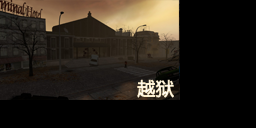
<style>
.page{position:relative;width:256px;height:128px;background:#000000}
.page>*{position:absolute;margin:0}
.t1{font:18px "MicrosoftYaHei";color:#fbf3dd;font-weight:bold}
</style>
<div class="page">
<p class="t1" style="left:137px;top:79px;width:37px;height:19px">越狱</p>
</div>
